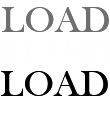
<style>
.page{position:relative;width:110px;height:128px;background:#ffffff}
.page>*{position:absolute;margin:0}
.t1{font:38px "BaskOldFace";color:#706f70}
.t2{font:38px "BaskOldFace";color:#000000}
</style>
<div class="page">
<p class="t1" style="left:2px;top:7px;width:107px;height:25px">LOAD</p>
<p class="t2" style="left:1px;top:71px;width:107px;height:25px">LOAD</p>
</div>
